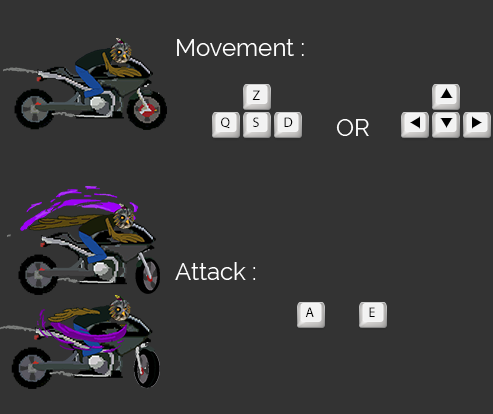
<style>
.page{position:relative;width:493px;height:414px;background:#333333}
.page>*{position:absolute;margin:0}
.t1{font:24px "Raleway-Regular";color:#ffffff}
</style>
<div class="page">
<p class="t1" style="left:177px;top:39px;width:127px;height:17px">Movement :</p>
<p class="t1" style="left:336px;top:119px;width:33px;height:17px">OR</p>
<p class="t1" style="left:175px;top:262px;width:81px;height:18px">Attack :</p>
</div>
